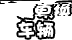
<style>
.page{position:relative;width:72px;height:40px;background:#ffffff}
.page>*{position:absolute;margin:0}
.t1{font:18.1px/19.3px "DFPHaiBaoW12";letter-spacing:0.05em;color:#ffffff}
</style>
<div class="page">
<p class="t1" style="left:18px;top:2px;width:36px;height:36px;text-align:center">更换<br>车辆</p>
</div>
